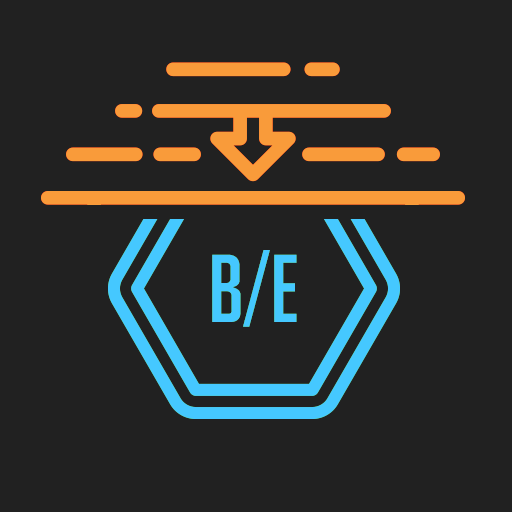
<style>
.page{position:relative;width:512px;height:512px;background:#212121}
.page>*{position:absolute;margin:0}
.t1{font:93.7px "BigNoodleTitling";color:#45c8ff}
</style>
<div class="page">
<p class="t1" style="left:212px;top:250px;width:85px;height:77px">B/E</p>
<p class="t1" style="left:212px;top:250px;width:85px;height:77px">B/E</p>
</div>
